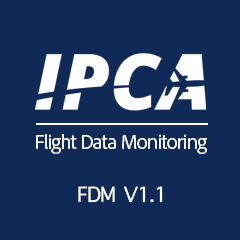
<style>
.page{position:relative;width:240px;height:240px;background:#102a58}
.page>*{position:absolute;margin:0}
.t1{font:20.9px "AdobeClean-Regular";letter-spacing:-0.04em;color:#ffffff}
.t2{font:28.6px "AppleSymbols";letter-spacing:-0.04em;color:#ffffff}
</style>
<div class="page">
<p class="t1" style="left:36px;top:134px;width:171px;height:20px">Flight Data Monitoring</p>
<p class="t2" style="left:78px;top:186px;width:85px;height:17px">FDM V1.1</p>
</div>
